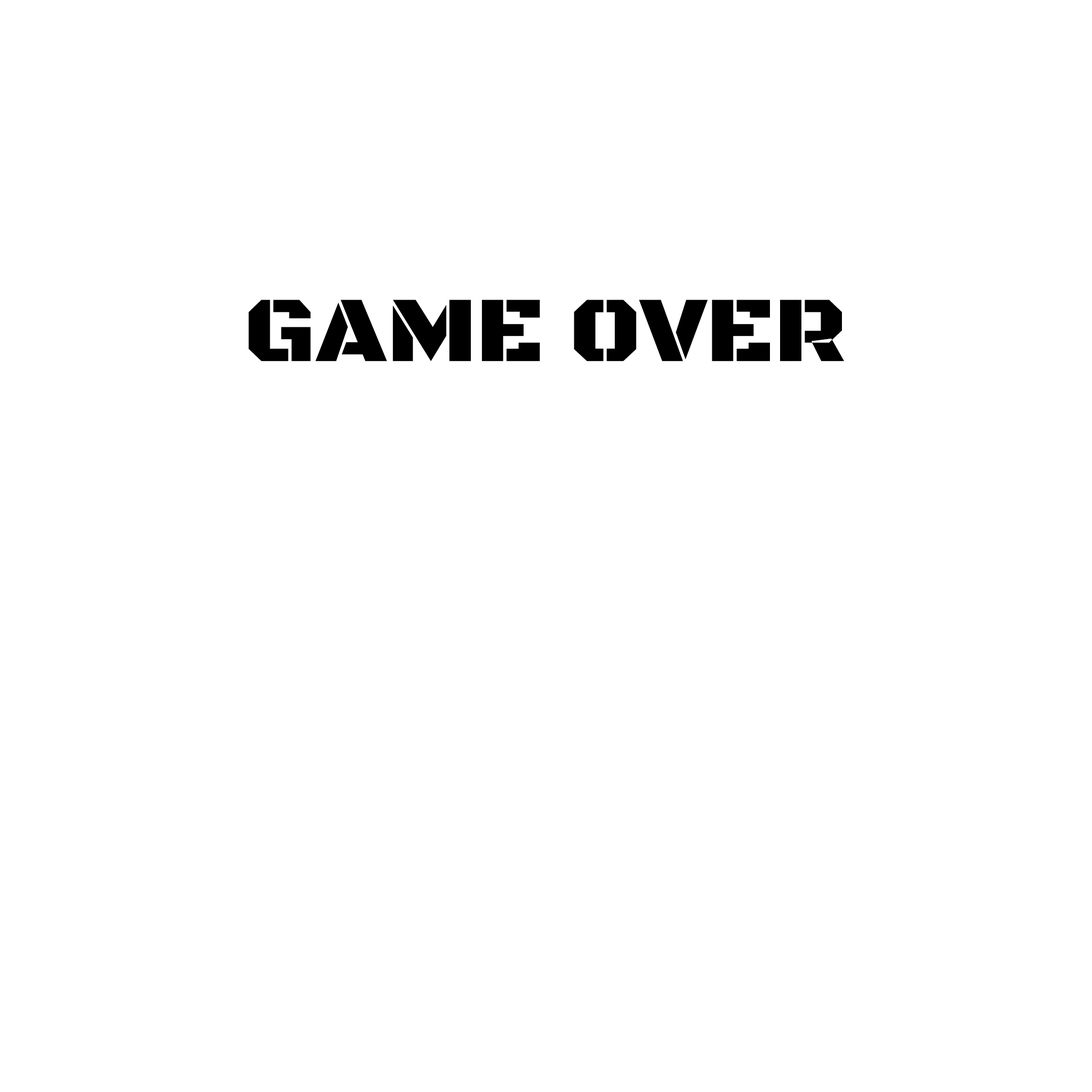
<style>
.page{position:relative;width:1092px;height:1092px;background:#ffffff}
.page>*{position:absolute;margin:0}
.t1{font:94.4px "BlackOpsOne-Regular";color:#000000;scale:1.04 1}
</style>
<div class="page">
<p class="t1" style="left:248px;top:300px;width:596px;height:62px">GAME OVER</p>
</div>
